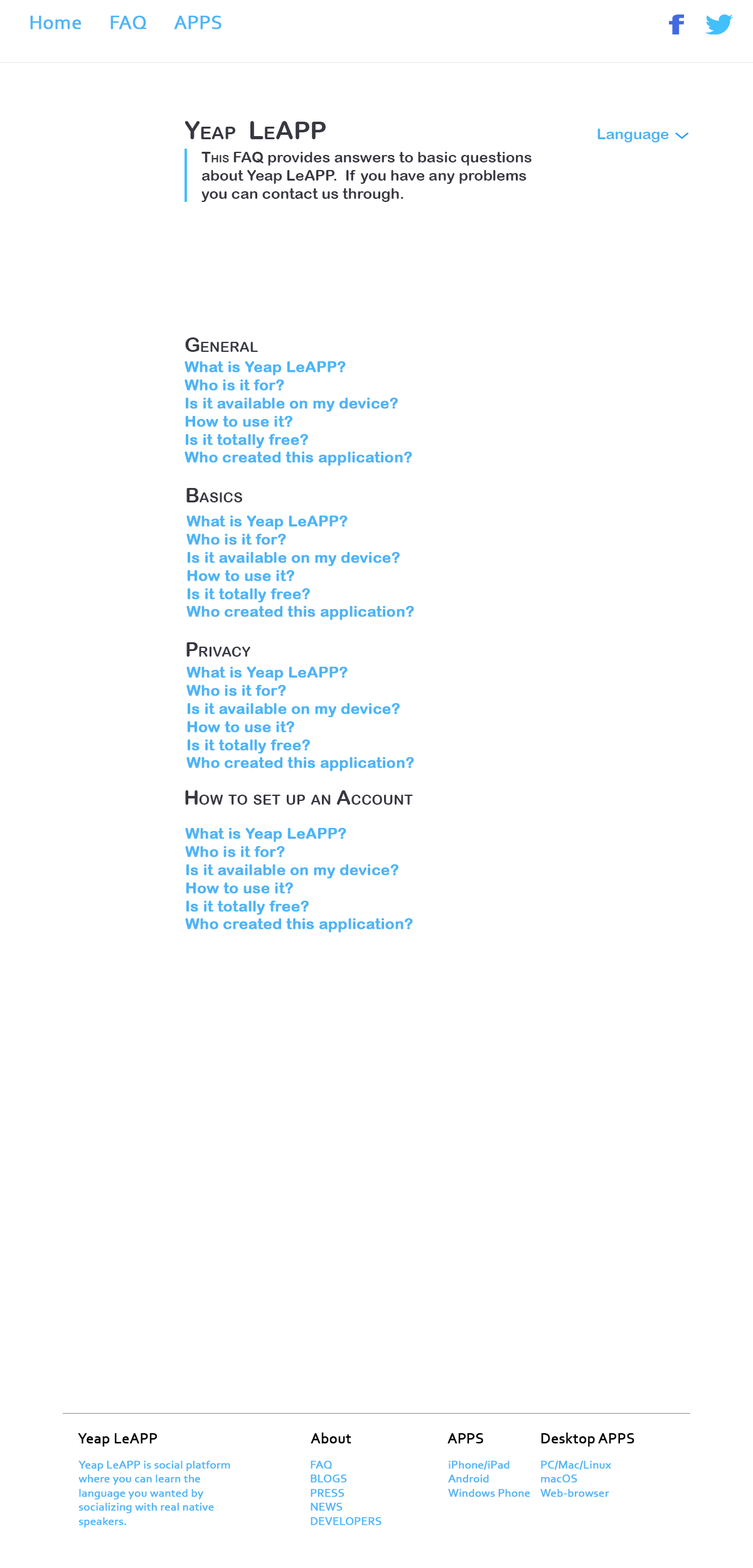
<style>
.page{position:relative;width:753px;height:1568px;background:#ffffff}
.page>*{position:absolute;margin:0}
.t1{font:20.1px "Corbel";color:#4cb4f7;font-weight:bold}
.t2{font:25.1px "ArialRoundedMTBold";color:#373841;font-variant:small-caps}
.t3{font:15.1px "ArialRoundedMTBold";color:#4cb4f7}
.t4{font:15.1px "ArialRoundedMTBold";color:#373841}
.t5{font:15.1px "ArialRoundedMTBold";color:#373841;font-variant:small-caps}
.t6{font:20.1px "ArialRoundedMTBold";color:#373841;font-variant:small-caps}
.t7{font:15.1px "ArialRoundedMTBold";color:#4cb4f7;font-weight:bold}
.t8{font:15.1px "Corbel";color:#000000;font-weight:bold}
.t9{font:11.7px "Corbel";color:#4cb4f7;font-weight:bold}
</style>
<div class="page">
<p class="t1" style="left:30px;top:16px;width:191px;height:13px">Home      FAQ      APPS</p>
<p class="t2" style="left:184px;top:121px;width:142px;height:18px">Yeap  LeAPP</p>
<p class="t3" style="left:597px;top:129px;width:72px;height:13px">Language</p>
<p class="t4" style="left:201px;top:152px;width:330px;height:50px;text-align:right"><span class="t5">This FAQ </span>provides answers to basic questions<br>about Yeap LeAPP.  If you have any problems<br>you can contact us through.</p>
<p class="t6" style="left:185px;top:337px;width:73px;height:15px">General</p>
<p class="t7" style="left:184px;top:361px;width:228px;height:105px;text-align:right">What is Yeap LeAPP?<br>Who is it for?<br>Is it available on my device?<br>How to use it?<br>Is it totally free?<br>Who created this application?</p>
<p class="t6" style="left:186px;top:488px;width:56px;height:14px">Basics</p>
<p class="t7" style="left:186px;top:516px;width:228px;height:104px;text-align:right">What is Yeap LeAPP?<br>Who is it for?<br>Is it available on my device?<br>How to use it?<br>Is it totally free?<br>Who created this application?</p>
<p class="t6" style="left:186px;top:642px;width:64px;height:15px">Privacy</p>
<p class="t7" style="left:186px;top:667px;width:228px;height:104px;text-align:right">What is Yeap LeAPP?<br>Who is it for?<br>Is it available on my device?<br>How to use it?<br>Is it totally free?<br>Who created this application?</p>
<p class="t6" style="left:185px;top:790px;width:228px;height:15px">How to set up an Account</p>
<p class="t7" style="left:185px;top:828px;width:228px;height:105px;text-align:right">What is Yeap LeAPP?<br>Who is it for?<br>Is it available on my device?<br>How to use it?<br>Is it totally free?<br>Who created this application?</p>
<p class="t8" style="left:78px;top:1433px;width:79px;height:14px">Yeap LeAPP</p>
<p class="t8" style="left:310px;top:1433px;width:41px;height:11px">About</p>
<p class="t8" style="left:447px;top:1433px;width:36px;height:11px">APPS</p>
<p class="t8" style="left:541px;top:1433px;width:93px;height:14px">Desktop APPS</p>
<p class="t9" style="left:78px;top:1461px;width:152px;height:67px;text-align:right">Yeap LeAPP is social platform<br>where you can learn the <br>language you wanted by <br>socializing with real native<br>speakers.</p>
<p class="t9" style="left:310px;top:1461px;width:71px;height:64px;text-align:right">FAQ<br>BLOGS<br>PRESS<br>NEWS<br>DEVELOPERS</p>
<p class="t9" style="left:448px;top:1461px;width:82px;height:36px;text-align:right">iPhone/iPad<br>Android<br>Windows Phone</p>
<p class="t9" style="left:540px;top:1461px;width:71px;height:36px;text-align:right">PC/Mac/Linux<br>macOS<br>Web-browser</p>
</div>
